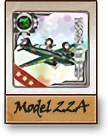
<style>
.page{position:relative;width:108px;height:136px}
.page>*{position:absolute;margin:0}
.t1{font:16px "VinerHandITC";letter-spacing:-0.08em;color:#1c1e1b;font-weight:bold}
</style>
<div class="page">
<p class="t1" style="left:13px;top:99px;width:77px;height:19px">Model 22A</p>
</div>
